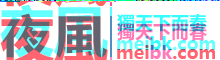
<style>
.page{position:relative;width:220px;height:60px;background:#ffffff}
.page>*{position:absolute;margin:0}
.t1{font:54px "MicrosoftYaHeiUI-Bold"}
.t2{font:18px "MicrosoftYaHei-Bold"}
</style>
<div class="page">
<p class="t1" style="left:0px;top:3px;width:108px;height:54px">夜風</p>
<p class="t2" style="left:117px;top:13px;width:90px;height:18px">獨天下而春</p>
<p class="t2" style="left:117px;top:35px;width:98px;height:14px">meibk.com</p>
</div>
